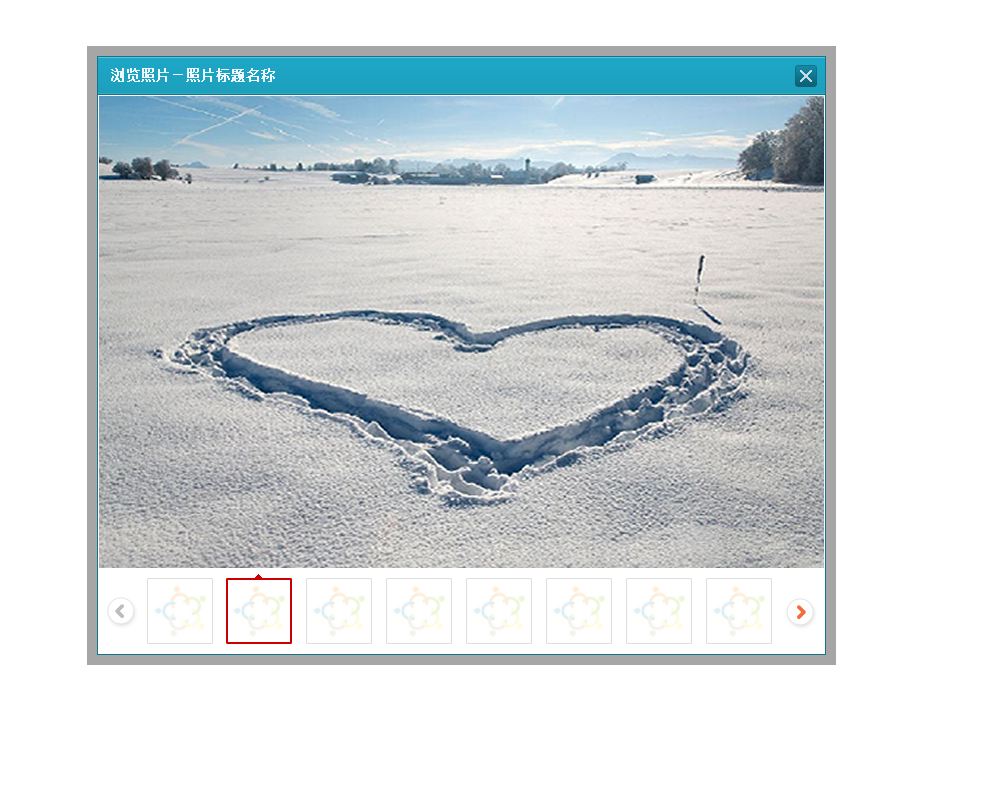
<style>
.page{position:relative;width:1000px;height:800px;background:#ffffff}
.page>*{position:absolute;margin:0}
.t1{font:14px "SimSun";color:#eef7fe;font-weight:bold}
</style>
<div class="page">
<p class="t1" style="left:111px;top:68px;width:164px;height:14px">浏览照片－照片标题名称</p>
</div>
